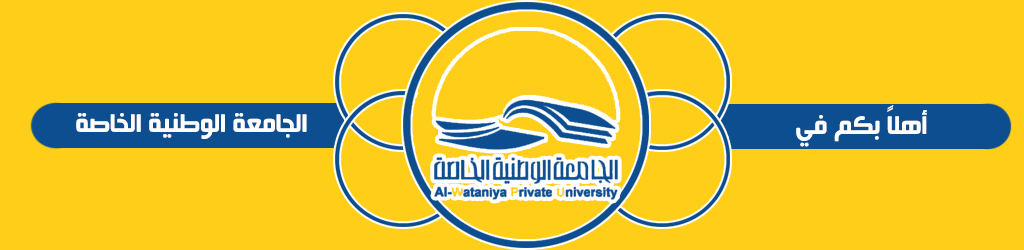
<style>
.page{position:relative;width:1024px;height:250px;background:#ffce19}
.page>*{position:absolute;margin:0}
.t1{font:30px "HacenBeirutPoster";color:#fefefe;scale:1.05 1}
.t2{font:30px "HacenBeirutPoster";color:#ffffff;scale:1.05 1}
</style>
<div class="page">
<p class="t1" style="left:76px;top:113px;width:231px;height:26px">الجامعة الوطنية الخاصة</p>
<p class="t2" style="left:796px;top:105px;width:131px;height:42px">أهلاً بكم في</p>
</div>
